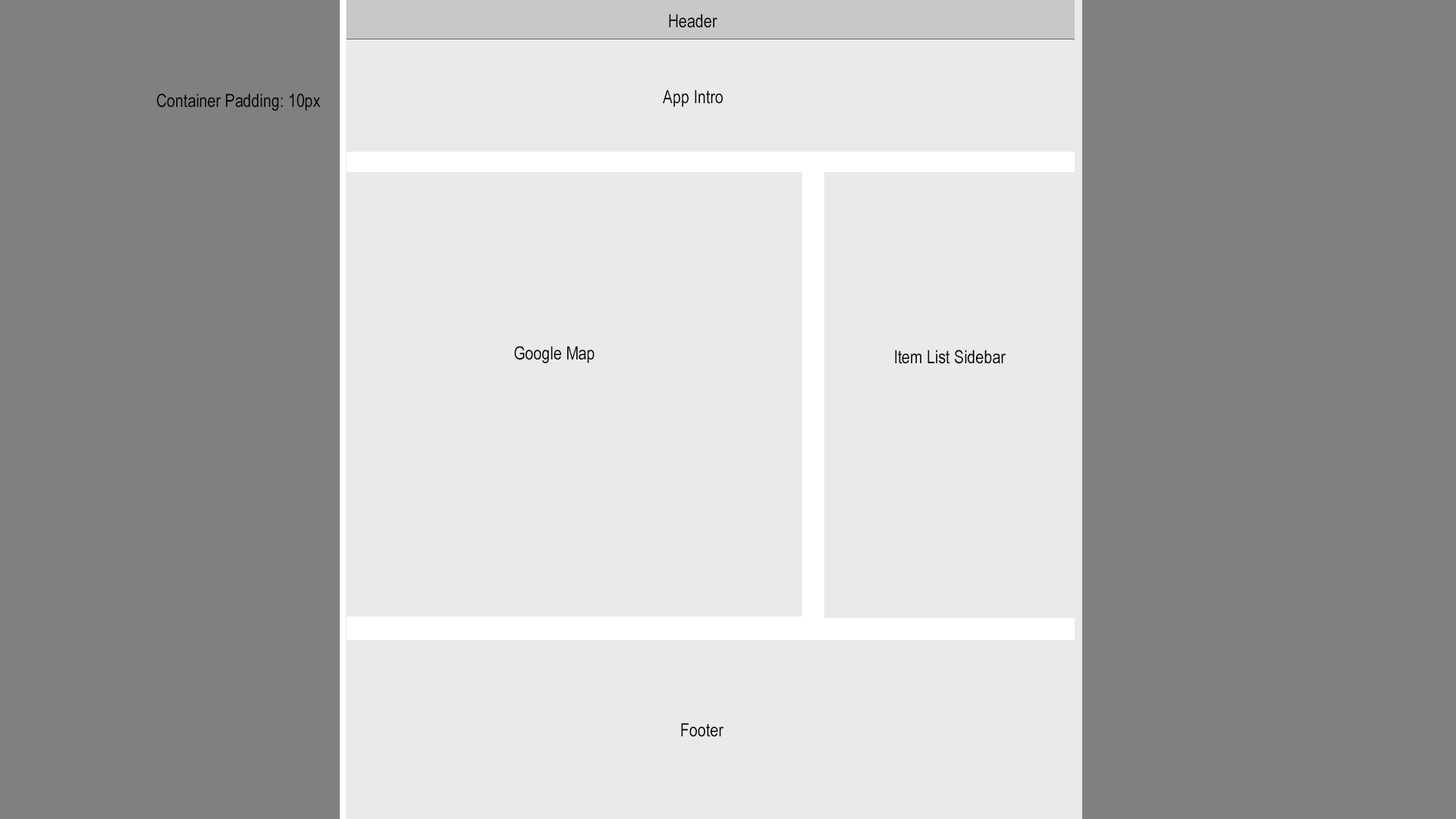
<style>
.page{position:relative;width:1456px;height:819px;background:#808080}
.page>*{position:absolute;margin:0}
.t1{font:18.2px "ArialNarrow";color:#000000}
</style>
<div class="page">
<p class="t1" style="left:669px;top:14px;width:48px;height:14px">Header</p>
<p class="t1" style="left:663px;top:89px;width:60px;height:18px">App Intro</p>
<p class="t1" style="left:157px;top:93px;width:164px;height:18px">Container Padding: 10px</p>
<p class="t1" style="left:514px;top:346px;width:81px;height:17px">Google Map</p>
<p class="t1" style="left:895px;top:350px;width:111px;height:14px">Item List Sidebar</p>
<p class="t1" style="left:681px;top:723px;width:43px;height:14px">Footer</p>
</div>
